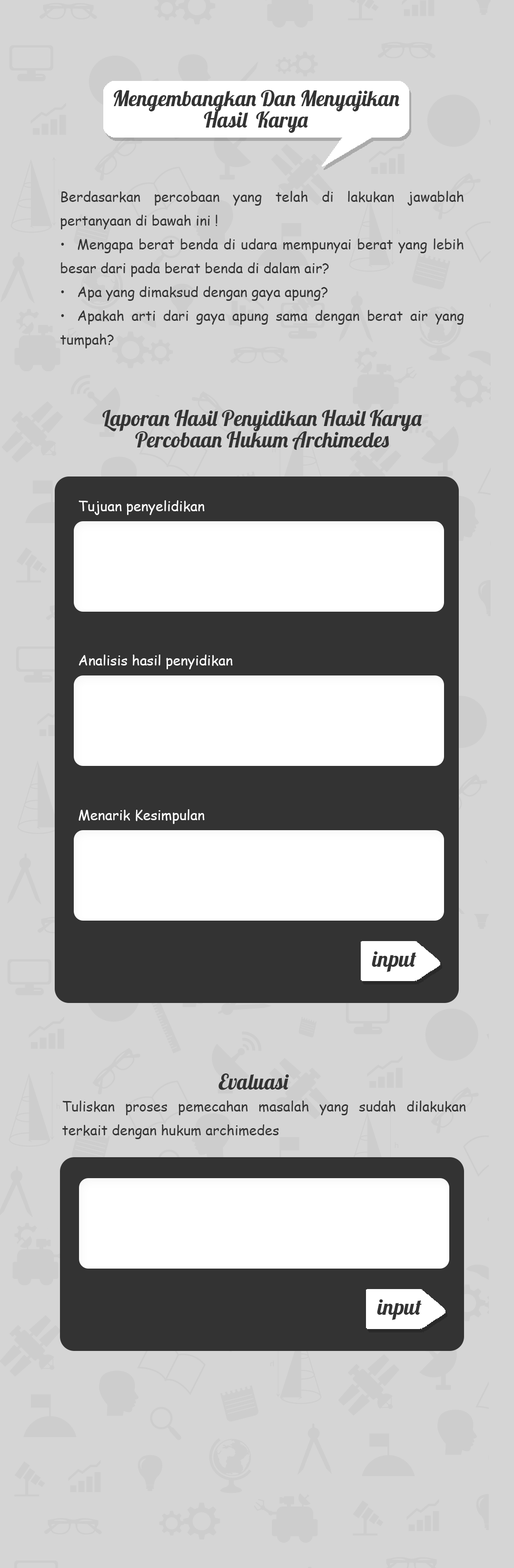
<style>
.page{position:relative;width:514px;height:1568px;background:#d5d5d5}
.page>*{position:absolute;margin:0}
.t1{font:21.2px/21.2px "Lobster-Regular";color:#333333}
.t2{font:13.9px/23.8px "ComicSansMS";color:#333333}
.t3{font:13.9px "ComicSansMS";color:#ffffff}
.t4{font:21.8px "Lobster-Regular";color:#333333}
.t5{font:21.2px "Lobster-Regular";color:#333333}
</style>
<div class="page">
<p class="t1" style="left:114px;top:90px;width:286px;height:43px;text-align:center">Mengembangkan Dan Menyajikan<br>Hasil  Karya</p>
<p class="t2" style="left:60px;top:191px;width:404px;height:157px;text-align:justify">Berdasarkan percobaan yang telah di lakukan jawablah pertanyaan di bawah ini !<br>• Mengapa berat benda di udara mempunyai berat yang lebih besar dari pada berat benda di dalam air?<br>• Apa yang dimaksud dengan gaya apung?<br>• Apakah arti dari gaya apung sama dengan berat air yang tumpah?</p>
<p class="t1" style="left:102px;top:410px;width:320px;height:40px;text-align:center">Laporan Hasil Penyidikan Hasil Karya Percobaan Hukum Archimedes</p>
<p class="t3" style="left:79px;top:500px;width:126px;height:15px">Tujuan penyelidikan</p>
<p class="t3" style="left:79px;top:655px;width:154px;height:14px">Analisis hasil penyidikan</p>
<p class="t3" style="left:79px;top:809px;width:126px;height:15px">Menarik Kesimpulan</p>
<p class="t4" style="left:372px;top:951px;width:45px;height:21px">input</p>
<p class="t5" style="left:218px;top:1073px;width:71px;height:17px">Evaluasi</p>
<p class="t2" style="left:62px;top:1101px;width:404px;height:38px;text-align:justify">Tuliskan proses pemecahan masalah yang sudah dilakukan terkait dengan hukum archimedes</p>
<p class="t4" style="left:377px;top:1299px;width:45px;height:21px">input</p>
</div>
